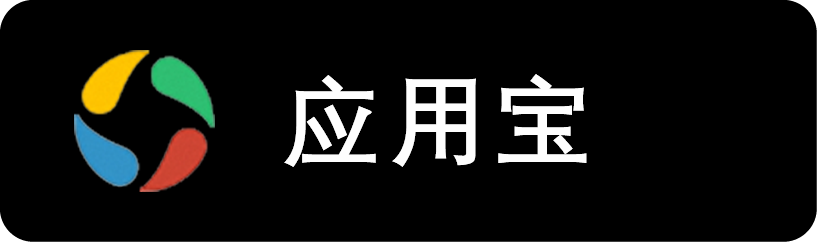
<style>
.page{position:relative;width:817px;height:242px;background:#000000}
.page>*{position:absolute;margin:0}
.t1{font:100px "DengXian-Bold";letter-spacing:0.05em;color:#fefefe}
</style>
<div class="page">
<p class="t1" style="left:284px;top:74px;width:303px;height:93px">应用宝</p>
</div>
